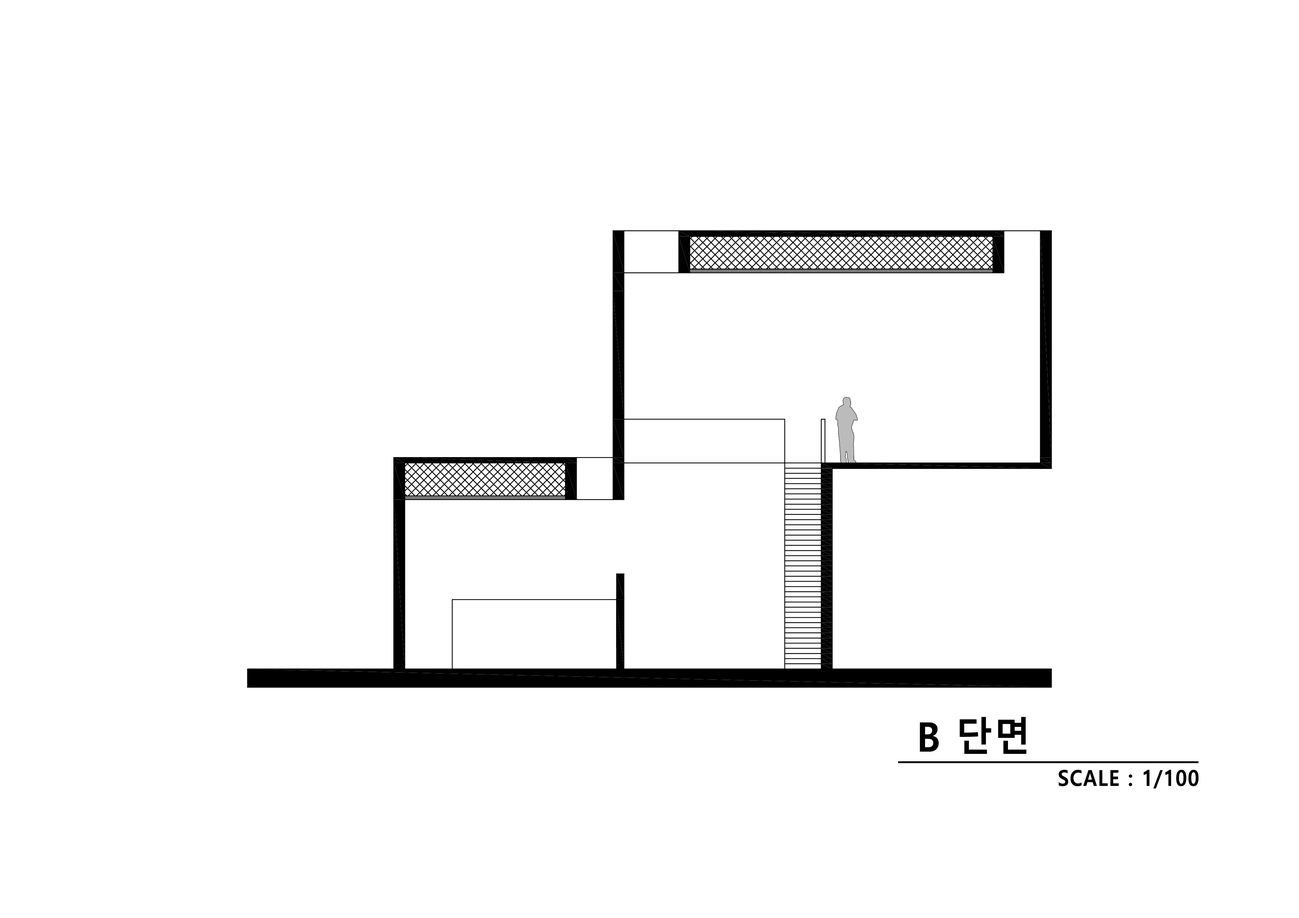
<style>
.page{position:relative;width:1299px;height:918px;background:#ffffff}
.page>*{position:absolute;margin:0}
.t1{font:40.6px "MalgunGothicBold";letter-spacing:0.04em;color:#000000;scale:0.9 1}
.t2{font:21.9px "MalgunGothicBold";letter-spacing:0.04em;color:#000000;scale:0.9 1}
</style>
<div class="page">
<p class="t1" style="left:920px;top:717px;width:106px;height:37px">B 단면</p>
<p class="t2" style="left:1058px;top:770px;width:140px;height:19px">SCALE : 1/100</p>
</div>
